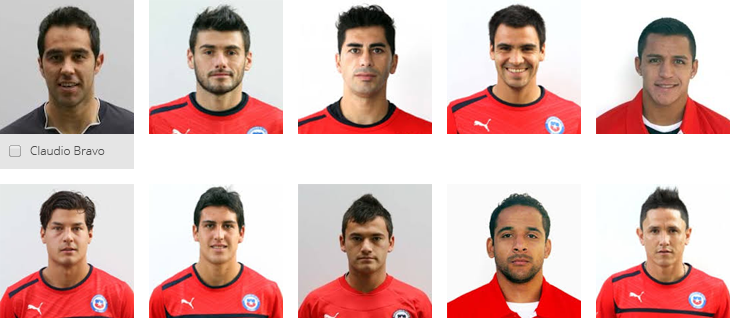
<style>
.page{position:relative;width:730px;height:323px;background:#ffffff}
.page>*{position:absolute;margin:0}
.t1{font:12px "OpenSans-Light";color:#4f4f4f}
</style>
<div class="page">
<p class="t1" style="left:30px;top:146px;width:75px;height:9px">Claudio Bravo</p>
</div>
